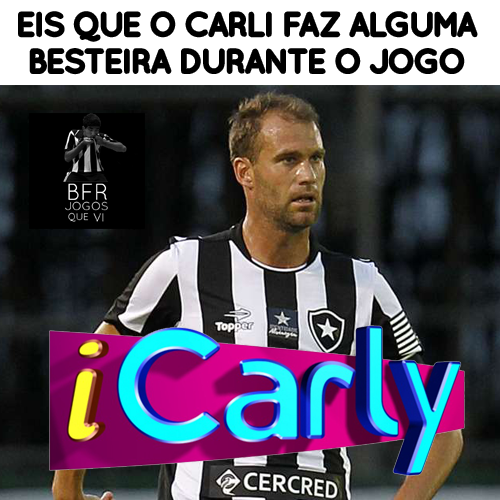
<style>
.page{position:relative;width:500px;height:500px}
.page>*{position:absolute;margin:0}
.t1{font:30.7px "QuicksandBook-Regular";color:#000000}
</style>
<div class="page">
<p class="t1" style="left:20px;top:13px;width:456px;height:60px;text-align:center">EIS QUE O CARLI FAZ ALGUMA BESTEIRA DURANTE O JOGO</p>
</div>
